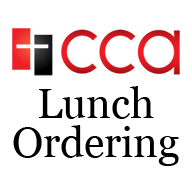
<style>
.page{position:relative;width:192px;height:192px;background:#ffffff}
.page>*{position:absolute;margin:0}
.t1{font:41.6px/38.4px "Georgia";color:#000000}
</style>
<div class="page">
<p class="t1" style="left:13px;top:86px;width:166px;height:80px;text-align:center">Lunch<br>Ordering</p>
</div>
